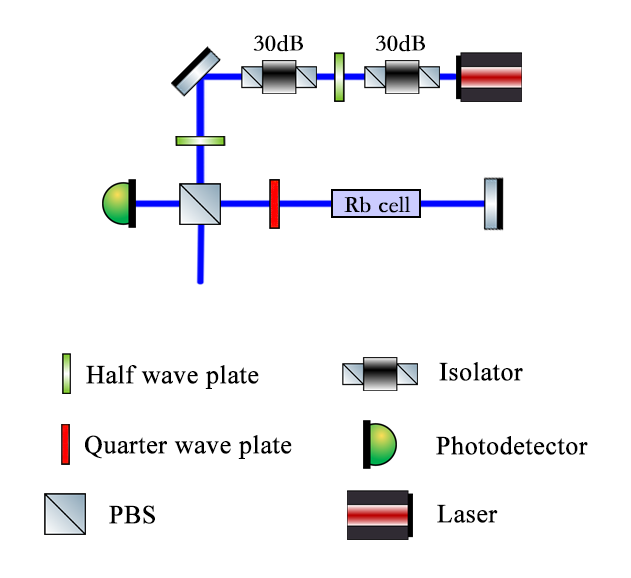
<style>
.page{position:relative;width:631px;height:578px;background:#ffffff}
.page>*{position:absolute;margin:0}
.t1{font:23.6px "STFangsong";color:#000000;font-weight:bold}
.t2{font:23.2px "STFangsong";color:#000000;font-weight:bold}
.t3{font:25.7px "TimesNewRomanPSMT";color:#000000;font-weight:bold}
</style>
<div class="page">
<p class="t1" style="left:253px;top:35px;width:50px;height:17px">30dB</p>
<p class="t1" style="left:375px;top:35px;width:50px;height:17px">30dB</p>
<p class="t2" style="left:344px;top:196px;width:67px;height:17px">Rb cell</p>
<p class="t3" style="left:86px;top:365px;width:173px;height:24px">Half wave plate</p>
<p class="t3" style="left:439px;top:362px;width:84px;height:19px">Isolator</p>
<p class="t3" style="left:85px;top:435px;width:207px;height:24px">Quarter wave plate</p>
<p class="t3" style="left:436px;top:436px;width:152px;height:19px">Photodetector</p>
<p class="t3" style="left:109px;top:505px;width:46px;height:19px">PBS</p>
<p class="t3" style="left:437px;top:504px;width:61px;height:19px">Laser</p>
</div>
